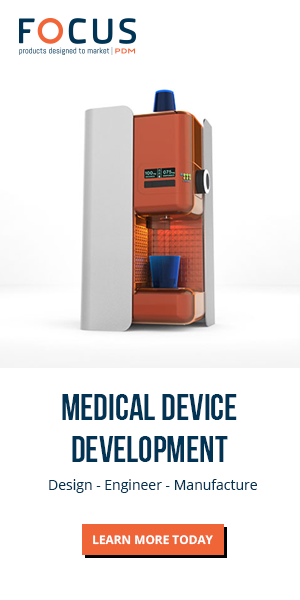
<style>
.page{position:relative;width:300px;height:600px;background:#ffffff}
.page>*{position:absolute;margin:0}
.t1{font:36px/42px "BebasNeueBold";color:#003354}
.t2{font:14px "OpenSans";color:#003354}
.t3{font:12px "OpenSans-Bold";color:#ffffff}
</style>
<div class="page">
<p class="t1" style="left:62px;top:394px;width:175px;height:68px;text-align:center">MEDICAL DEVICE<br>DEVELOPMENT</p>
<p class="t2" style="left:49px;top:479px;width:208px;height:14px">Design - Engineer - Manufacture</p>
<p class="t3" style="left:93px;top:535px;width:120px;height:10px">LEARN MORE TODAY</p>
</div>
